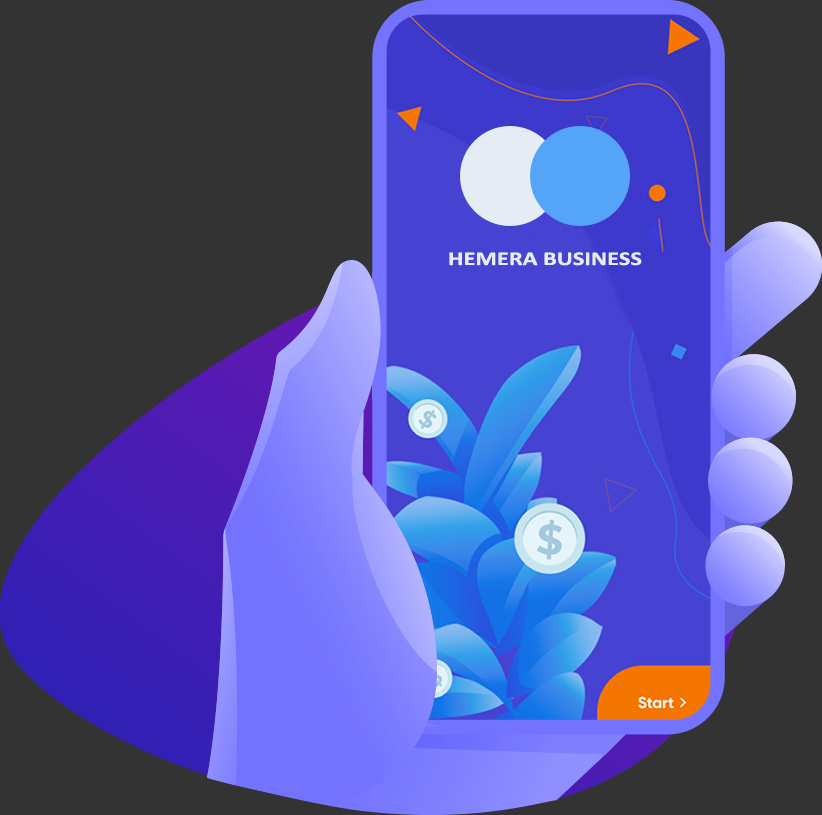
<style>
.page{position:relative;width:822px;height:815px;background:#333333}
.page>*{position:absolute;margin:0}
.t1{font:19.6px "Calibri-Bold";color:#e5ecf3;scale:1.25 1}
</style>
<div class="page">
<p class="t1" style="left:449px;top:252px;width:193px;height:14px">HEMERA BUSINESS</p>
</div>
